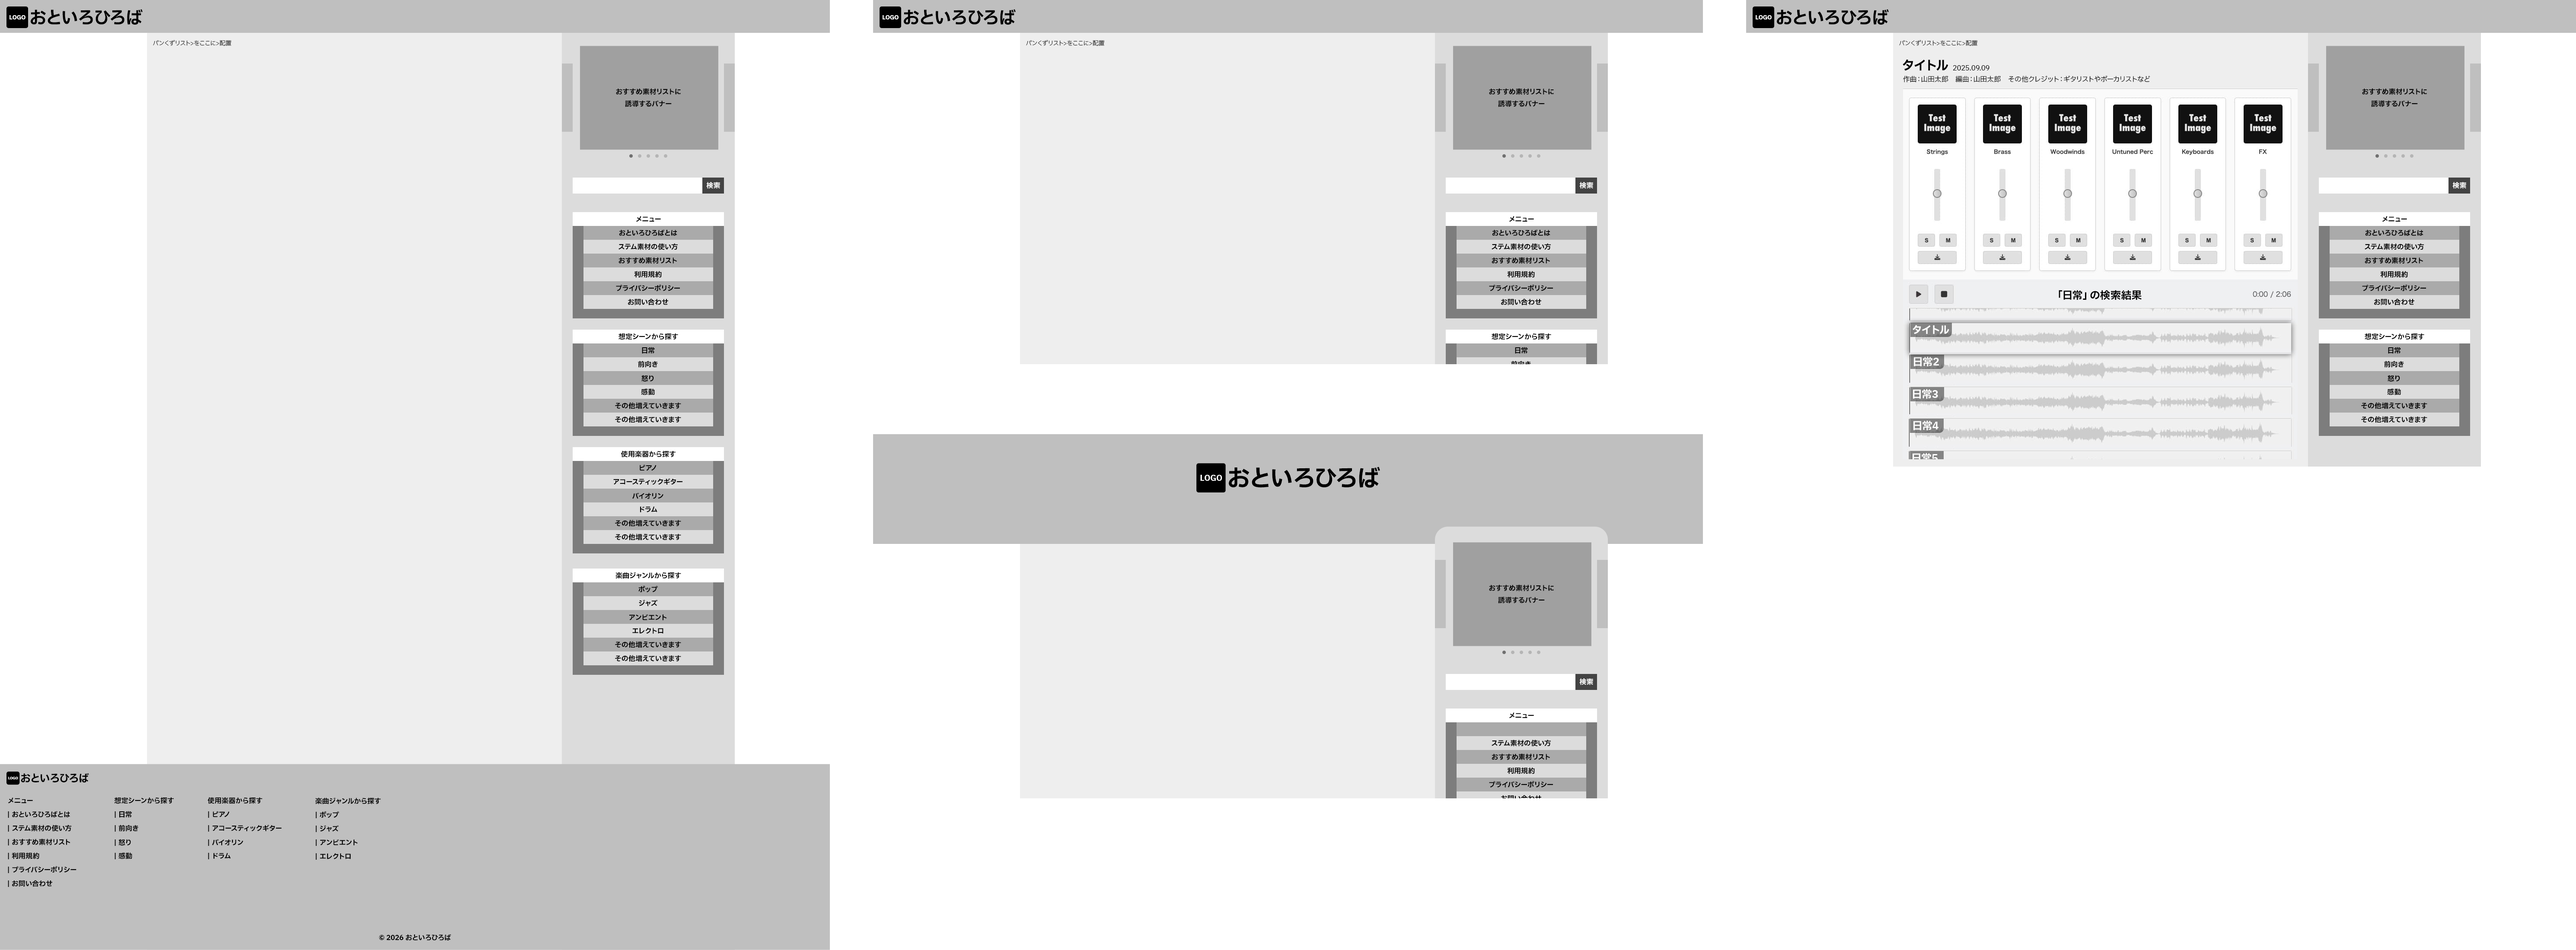
<style>
.page{position:relative;width:2576px;height:950px;background:#ffffff}
.page>*{position:absolute;margin:0}
.t1{font:6.1px "IBMPlexSansJP-Bold";color:#ffffff}
.t2{font:17.3px "IBMPlexSansJP-Bold";color:#000000}
.t3{font:6.1px "IBMPlexSansJP-Light";color:#000000}
.t4{font:13px "IBMPlexSansJP-Bold";color:#000000}
.t5{font:6.9px "IBMPlexSansJP-Regular";color:#000000}
.t6{font:6.9px "IBMPlexSansJP-Bold";color:#000000}
.t7{font:6.9px "IBMPlexSansJP-Bold";color:#ffffff}
.t8{font:10.4px "IBMPlexSansJP-Bold";color:#000000}
.t9{font:6.9px "IBMPlexSansJP-Bold"}
.t10{font:23.3px "IBMPlexSansJP-Bold";color:#000000}
.t11{font:8.2px "IBMPlexSansJP-Bold";color:#ffffff}
.t12{font:10.5px "IBMPlexSansJP-Bold";color:#000000}
.t13{font:3.7px "IBMPlexSansJP-Bold";color:#ffffff}
</style>
<div class="page">
<p class="t1" style="left:10px;top:15px;width:16px;height:4px">LOGO</p>
<p class="t2" style="left:31px;top:9px;width:112px;height:16px">おといろひろば</p>
<p class="t1" style="left:883px;top:15px;width:16px;height:4px">LOGO</p>
<p class="t2" style="left:904px;top:9px;width:112px;height:16px">おといろひろば</p>
<p class="t1" style="left:1756px;top:15px;width:16px;height:4px">LOGO</p>
<p class="t2" style="left:1777px;top:9px;width:112px;height:16px">おといろひろば</p>
<p class="t3" style="left:153px;top:40px;width:79px;height:6px">パンくずリスト&gt;をここに&gt;配置</p>
<p class="t3" style="left:1026px;top:40px;width:79px;height:6px">パンくずリスト&gt;をここに&gt;配置</p>
<p class="t3" style="left:1899px;top:40px;width:79px;height:6px">パンくずリスト&gt;をここに&gt;配置</p>
<p class="t4" style="left:1903px;top:59px;width:45px;height:12px">タイトル</p>
<p class="t5" style="left:1953px;top:65px;width:36px;height:5px">2025.09.09</p>
<p class="t5" style="left:1903px;top:76px;width:247px;height:7px">作曲：山田太郎　編曲：山田太郎　その他クレジット：ギタリストやボーカリストなど</p>
<p class="t6" style="left:616px;top:88px;width:65px;height:19px;text-align:center">おすすめ素材リストに<br>誘導するバナー</p>
<p class="t6" style="left:1489px;top:88px;width:65px;height:19px;text-align:center">おすすめ素材リストに<br>誘導するバナー</p>
<p class="t6" style="left:2362px;top:88px;width:65px;height:19px;text-align:center">おすすめ素材リストに<br>誘導するバナー</p>
<p class="t7" style="left:706px;top:182px;width:14px;height:7px">検索</p>
<p class="t7" style="left:1579px;top:182px;width:14px;height:7px">検索</p>
<p class="t7" style="left:2452px;top:182px;width:14px;height:7px">検索</p>
<p class="t6" style="left:636px;top:216px;width:25px;height:6px">メニュー</p>
<p class="t6" style="left:1509px;top:216px;width:25px;height:6px">メニュー</p>
<p class="t6" style="left:2382px;top:216px;width:25px;height:6px">メニュー</p>
<p class="t6" style="left:619px;top:230px;width:58px;height:6px">おといろひろばとは</p>
<p class="t6" style="left:1492px;top:230px;width:58px;height:6px">おといろひろばとは</p>
<p class="t6" style="left:2365px;top:230px;width:58px;height:6px">おといろひろばとは</p>
<p class="t6" style="left:618px;top:243px;width:60px;height:7px">ステム素材の使い方</p>
<p class="t6" style="left:1492px;top:243px;width:59px;height:7px">ステム素材の使い方</p>
<p class="t6" style="left:2365px;top:243px;width:59px;height:7px">ステム素材の使い方</p>
<p class="t6" style="left:618px;top:257px;width:59px;height:7px">おすすめ素材リスト</p>
<p class="t6" style="left:1492px;top:257px;width:58px;height:7px">おすすめ素材リスト</p>
<p class="t6" style="left:2365px;top:257px;width:58px;height:7px">おすすめ素材リスト</p>
<p class="t6" style="left:634px;top:271px;width:28px;height:7px">利用規約</p>
<p class="t6" style="left:1507px;top:271px;width:28px;height:7px">利用規約</p>
<p class="t6" style="left:2380px;top:271px;width:28px;height:7px">利用規約</p>
<p class="t6" style="left:616px;top:285px;width:64px;height:6px">プライバシーポリシー</p>
<p class="t6" style="left:1489px;top:285px;width:64px;height:6px">プライバシーポリシー</p>
<p class="t8" style="left:2059px;top:290px;width:83px;height:10px">「日常」の検索結果</p>
<p class="t6" style="left:2362px;top:285px;width:64px;height:6px">プライバシーポリシー</p>
<p class="t6" style="left:628px;top:299px;width:40px;height:7px">お問い合わせ</p>
<p class="t6" style="left:1501px;top:299px;width:40px;height:7px">お問い合わせ</p>
<p class="t6" style="left:2374px;top:299px;width:40px;height:7px">お問い合わせ</p>
<p class="t6" style="left:618px;top:333px;width:60px;height:7px">想定シーンから探す</p>
<p class="t6" style="left:1492px;top:333px;width:59px;height:7px">想定シーンから探す</p>
<p class="t6" style="left:2365px;top:333px;width:59px;height:7px">想定シーンから探す</p>
<p class="t6" style="left:642px;top:347px;width:13px;height:7px">日常</p>
<p class="t6" style="left:1515px;top:347px;width:13px;height:7px">日常</p>
<p class="t6" style="left:2388px;top:347px;width:13px;height:7px">日常</p>
<p class="t6" style="left:638px;top:361px;width:20px;height:7px">前向き</p>
<p class="t9" style="left:1511px;top:361px;width:20px;height:7px">前向き</p>
<p class="t6" style="left:2384px;top:361px;width:20px;height:7px">前向き</p>
<p class="t6" style="left:641px;top:375px;width:13px;height:7px">怒り</p>
<p class="t6" style="left:2388px;top:375px;width:12px;height:7px">怒り</p>
<p class="t6" style="left:641px;top:389px;width:14px;height:6px">感動</p>
<p class="t6" style="left:2387px;top:389px;width:14px;height:6px">感動</p>
<p class="t6" style="left:615px;top:402px;width:66px;height:7px">その他増えていきます</p>
<p class="t6" style="left:2361px;top:402px;width:66px;height:7px">その他増えていきます</p>
<p class="t6" style="left:615px;top:416px;width:66px;height:7px">その他増えていきます</p>
<p class="t6" style="left:2361px;top:416px;width:66px;height:7px">その他増えていきます</p>
<p class="t6" style="left:621px;top:451px;width:55px;height:7px">使用楽器から探す</p>
<p class="t6" style="left:640px;top:465px;width:17px;height:6px">ピアノ</p>
<p class="t10" style="left:1229px;top:467px;width:151px;height:21px">おといろひろば</p>
<p class="t6" style="left:613px;top:478px;width:69px;height:7px">アコースティックギター</p>
<p class="t11" style="left:1200px;top:475px;width:22px;height:6px">LOGO</p>
<p class="t6" style="left:632px;top:493px;width:31px;height:6px">バイオリン</p>
<p class="t6" style="left:640px;top:507px;width:17px;height:6px">ドラム</p>
<p class="t6" style="left:615px;top:520px;width:66px;height:7px">その他増えていきます</p>
<p class="t6" style="left:615px;top:534px;width:66px;height:7px">その他増えていきます</p>
<p class="t6" style="left:615px;top:572px;width:66px;height:7px">楽曲ジャンルから探す</p>
<p class="t6" style="left:638px;top:586px;width:20px;height:7px">ポップ</p>
<p class="t6" style="left:1489px;top:585px;width:65px;height:19px;text-align:center">おすすめ素材リストに<br>誘導するバナー</p>
<p class="t6" style="left:639px;top:600px;width:19px;height:7px">ジャズ</p>
<p class="t6" style="left:629px;top:615px;width:38px;height:6px">アンビエント</p>
<p class="t6" style="left:632px;top:628px;width:31px;height:6px">エレクトロ</p>
<p class="t6" style="left:615px;top:641px;width:66px;height:7px">その他増えていきます</p>
<p class="t6" style="left:615px;top:655px;width:66px;height:7px">その他増えていきます</p>
<p class="t7" style="left:1579px;top:679px;width:14px;height:6px">検索</p>
<p class="t6" style="left:1509px;top:713px;width:25px;height:6px">メニュー</p>
<p class="t6" style="left:1492px;top:740px;width:59px;height:7px">ステム素材の使い方</p>
<p class="t6" style="left:1492px;top:754px;width:58px;height:7px">おすすめ素材リスト</p>
<p class="t12" style="left:21px;top:773px;width:68px;height:10px">おといろひろば</p>
<p class="t6" style="left:1507px;top:768px;width:28px;height:7px">利用規約</p>
<p class="t13" style="left:8px;top:777px;width:10px;height:3px">LOGO</p>
<p class="t6" style="left:1489px;top:781px;width:64px;height:7px">プライバシーポリシー</p>
<p class="t6" style="left:8px;top:798px;width:25px;height:6px">メニュー</p>
<p class="t6" style="left:114px;top:797px;width:60px;height:7px">想定シーンから探す</p>
<p class="t6" style="left:207px;top:797px;width:55px;height:7px">使用楽器から探す</p>
<p class="t6" style="left:315px;top:798px;width:66px;height:7px">楽曲ジャンルから探す</p>
<p class="t9" style="left:1501px;top:795px;width:40px;height:7px">お問い合わせ</p>
<p class="t6" style="left:8px;top:811px;width:62px;height:7px">| おといろひろばとは</p>
<p class="t6" style="left:115px;top:811px;width:17px;height:7px">| 日常</p>
<p class="t6" style="left:208px;top:812px;width:22px;height:6px">| ピアノ</p>
<p class="t6" style="left:316px;top:812px;width:23px;height:7px">| ポップ</p>
<p class="t6" style="left:8px;top:825px;width:64px;height:7px">| ステム素材の使い方</p>
<p class="t6" style="left:115px;top:825px;width:23px;height:7px">| 前向き</p>
<p class="t6" style="left:208px;top:825px;width:74px;height:7px">| アコースティックギター</p>
<p class="t6" style="left:316px;top:826px;width:23px;height:6px">| ジャズ</p>
<p class="t6" style="left:8px;top:839px;width:62px;height:7px">| おすすめ素材リスト</p>
<p class="t6" style="left:115px;top:839px;width:16px;height:7px">| 怒り</p>
<p class="t6" style="left:208px;top:839px;width:35px;height:7px">| バイオリン</p>
<p class="t6" style="left:316px;top:840px;width:42px;height:6px">| アンビエント</p>
<p class="t6" style="left:8px;top:853px;width:31px;height:7px">| 利用規約</p>
<p class="t6" style="left:115px;top:853px;width:17px;height:7px">| 感動</p>
<p class="t6" style="left:208px;top:853px;width:23px;height:7px">| ドラム</p>
<p class="t6" style="left:316px;top:854px;width:35px;height:6px">| エレクトロ</p>
<p class="t6" style="left:8px;top:867px;width:69px;height:7px">| プライバシーポリシー</p>
<p class="t6" style="left:8px;top:880px;width:44px;height:7px">| お問い合わせ</p>
<p class="t6" style="left:379px;top:934px;width:72px;height:7px">©︎ 2026 おといろひろば</p>
</div>
